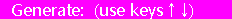
<style>
.page{position:relative;width:232px;height:19px;background:#ff00ff}
.page>*{position:absolute;margin:0}
.t1{font:16px "MicrosoftYaHei";color:#ffffff}
</style>
<div class="page">
<p class="t1" style="left:12px;top:3px;width:181px;height:17px">Generate:  (use keys ↑ ↓)</p>
</div>
